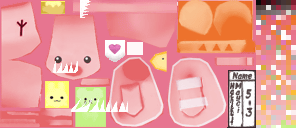
<style>
.page{position:relative;width:296px;height:128px}
.page>*{position:absolute;margin:0}
.t1{font:10px "DKMomotaro-Regular";letter-spacing:-0.025em;color:#564647;font-style:italic;scale:0.9 1}
.t2{font:8.1px/6px "DKMomotaro-Regular";letter-spacing:-0.5em;color:#564647;font-style:italic;scale:1.11 1}
.t3{font:9px/6px "DKMomotaro-Regular";letter-spacing:-0.4em;color:#564647;font-style:italic}
.t4{font:9px/6px "DKMomotaro-Regular";letter-spacing:-0.3em;color:#564647;font-style:italic}
.t5{font:14px/6px "DKMomotaro-Regular";letter-spacing:-0.5em;color:#564647;font-style:italic;scale:0.9 1}
</style>
<div class="page">
<p class="t1" style="left:232px;top:72px;width:21px;height:8px">Name</p>
<p class="t2" style="left:229px;top:82px;width:13px;height:44px"><span class="t3">Ma</span><span class="t4">yoi <br></span>Hachikuji</p>
<p class="t5" style="left:245px;top:89px;width:8px;height:28px">5<br><br><br>3</p>
</div>
